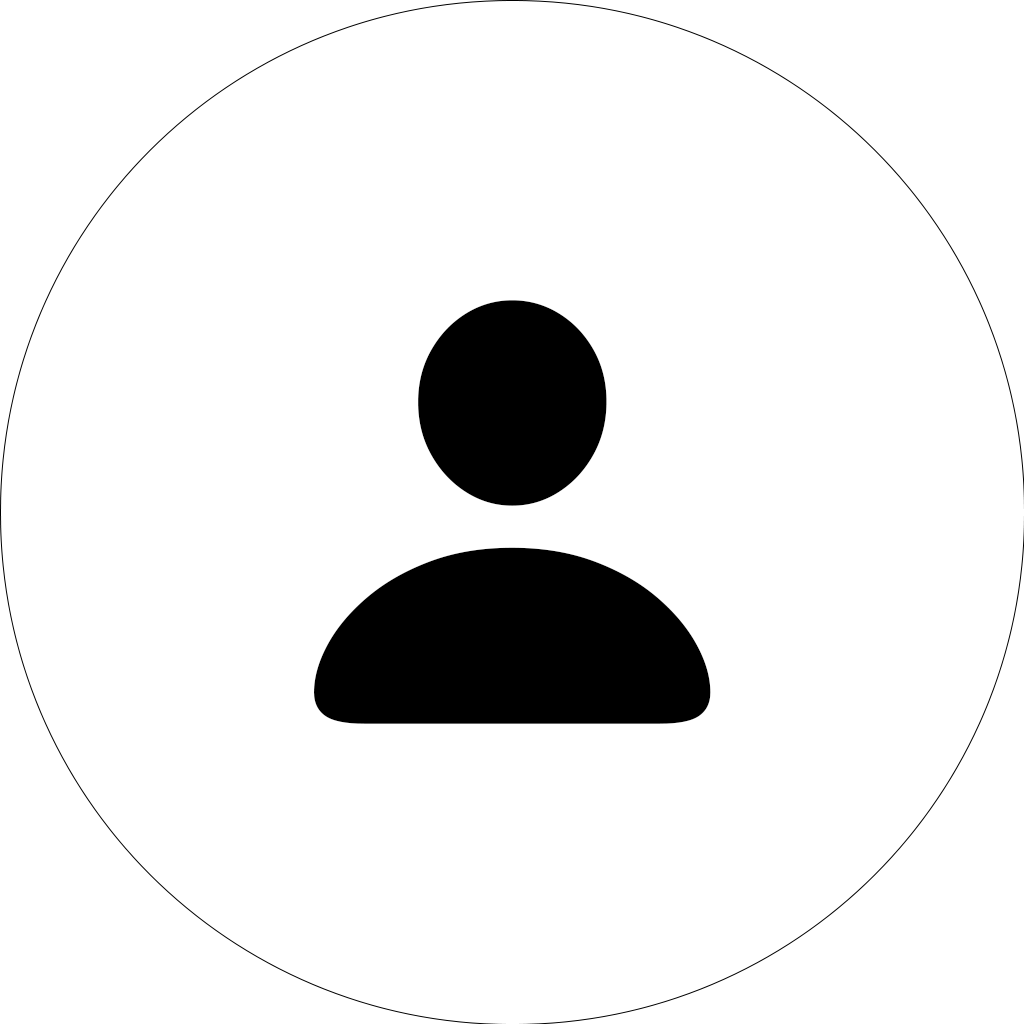
<style>
.page{position:relative;width:1024px;height:1024px;background:#ffffff}
.page>*{position:absolute;margin:0}
.t1{font:482.2px "SFPro-Regular";color:#000000}
</style>
<div class="page">
<p class="t1" style="left:314px;top:300px;width:397px;height:424px">􀉪</p>
</div>
